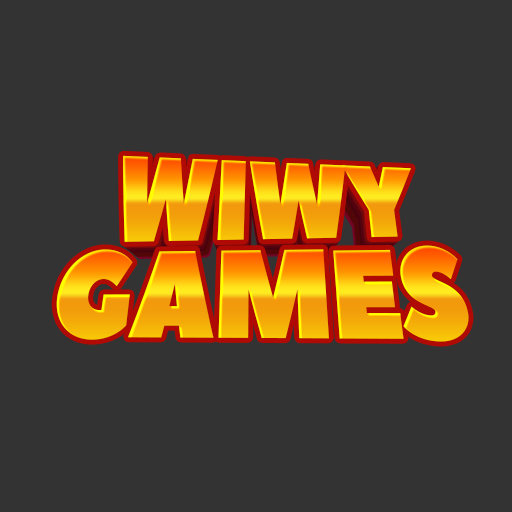
<style>
.page{position:relative;width:512px;height:512px;background:#333333}
.page>*{position:absolute;margin:0}
.t1{font:109.8px "PeaceSans";letter-spacing:-0.025em;scale:0.89 1}
.t2{font:107.6px "PeaceSans";letter-spacing:-0.025em;scale:0.89 1}
.t3{font:105.4px "PeaceSans";letter-spacing:-0.025em;scale:0.89 1}
.t4{font:103.3px "PeaceSans";letter-spacing:-0.025em;scale:0.89 1}
.t5{font:124.8px "PeaceSans";letter-spacing:-0.025em;scale:0.89 1}
</style>
<div class="page">
<p class="t1" style="left:123px;top:155px;width:288px;height:87px">WIWY</p>
<p class="t2" style="left:125px;top:159px;width:283px;height:85px">WIWY</p>
<p class="t3" style="left:128px;top:162px;width:278px;height:84px">WIWY</p>
<p class="t4" style="left:131px;top:166px;width:272px;height:82px">WIWY</p>
<p class="t5" style="left:56px;top:245px;width:413px;height:97px">GAMES</p>
</div>
